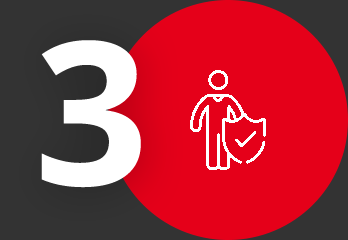
<style>
.page{position:relative;width:348px;height:240px;background:#e50019}
.page>*{position:absolute;margin:0}
.t1{font:200px "OpenSans-Bold";color:#ffffff}
</style>
<div class="page">
<p class="t1" style="left:41px;top:40px;width:100px;height:148px">3</p>
</div>
